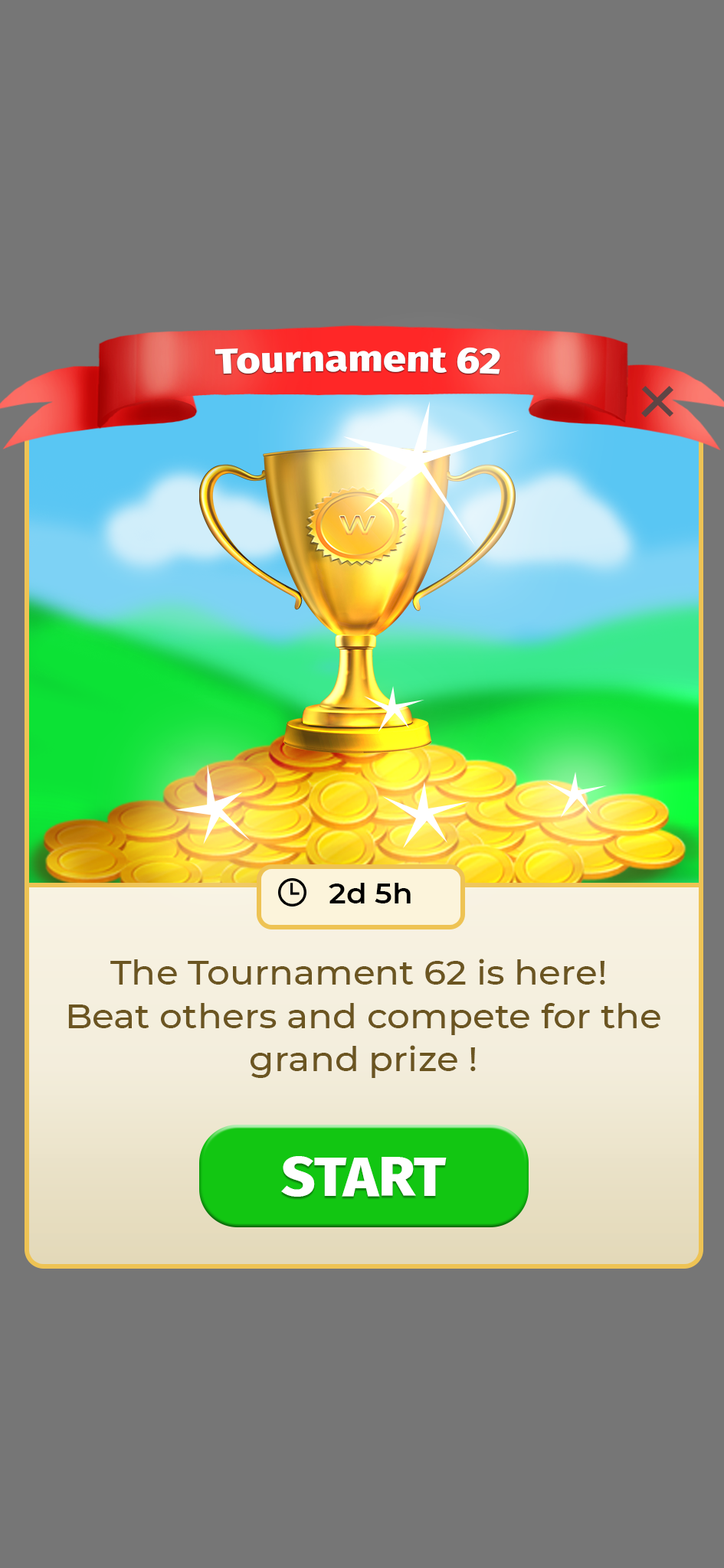
<style>
.page{position:relative;width:724px;height:1568px;background:#767676}
.page>*{position:absolute;margin:0}
.t1{font:35.7px "FiraSans-ExtraBold";color:#ffffff;scale:1.16 1}
.t2{font:28.4px "Montserrat-SemiBold";color:#000000;scale:1.05 1}
.t3{font:34.2px "Montserrat-Medium";color:#6b5521;scale:1.05 1}
.t4{font:56px "FiraSans-ExtraBold";color:#ffffff;scale:1.05 1}
</style>
<div class="page">
<p class="t1" style="left:214px;top:347px;width:286px;height:27px">Tournament 62</p>
<p class="t2" style="left:328px;top:883px;width:82px;height:20px">2d 5h</p>
<p class="t3" style="left:68px;top:959px;width:592px;height:119px;text-align:center">The Tournament 62 is here! <br>Beat others and compete for the<br>grand prize !</p>
<p class="t4" style="left:281px;top:1156px;width:165px;height:41px">START</p>
</div>
